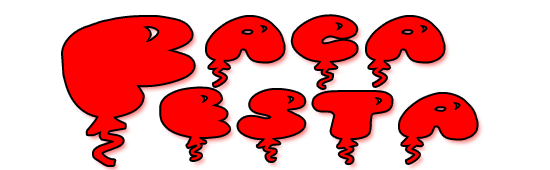
<style>
.page{position:relative;width:550px;height:170px;background:#ffffff}
.page>*{position:absolute;margin:0}
.t1{font:166.3px "JISolidBalloonCaps";color:#ff0000;scale:1.75 1}
.t2{font:83.1px "JISolidBalloonCaps";color:#ff0000;scale:1.75 1}
</style>
<div class="page">
<p class="t1" style="left:63px;top:17px;width:131px;height:148px">F</p>
<p class="t2" style="left:207px;top:16px;width:237px;height:72px">ACA</p>
<p class="t2" style="left:161px;top:88px;width:316px;height:75px">esta</p>
</div>
